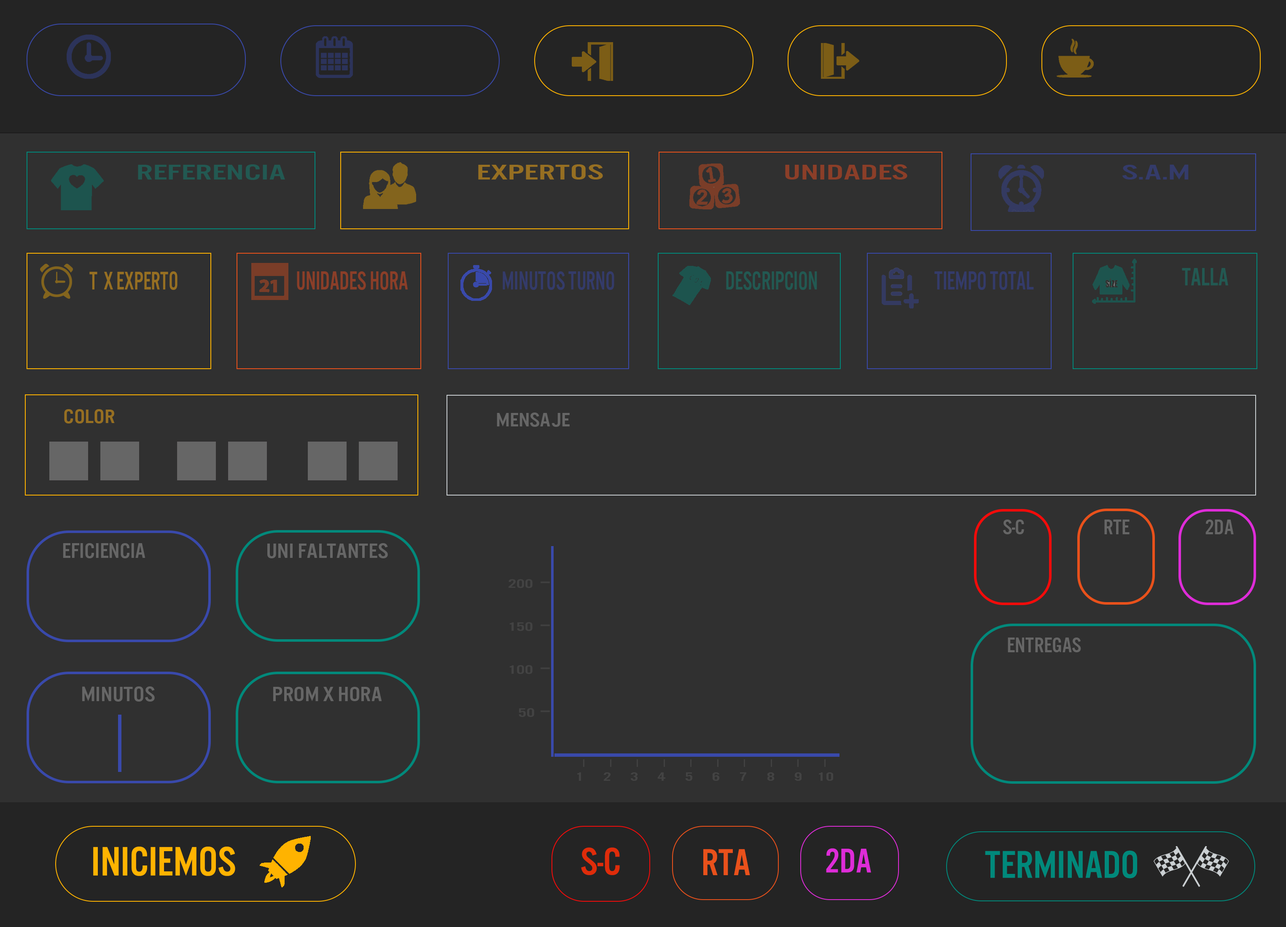
<style>
.page{position:relative;width:1286px;height:927px;background:#303030}
.page>*{position:absolute;margin:0}
.t1{font:22.2px "U.S.101";color:#225952;scale:1.71 1}
.t2{font:22.2px "U.S.101";color:#966f22;scale:1.71 1}
.t3{font:22.2px "U.S.101";color:#8b3e28;scale:1.71 1}
.t4{font:22.2px "U.S.101";color:#343b6a;scale:1.71 1}
.t5{font:26px "U.S.101";color:#225952;scale:0.89 1}
.t6{font:26.8px "U.S.101";color:#966f22;scale:0.79 1}
.t7{font:27.1px "U.S.101";color:#8b3e28;scale:0.79 1}
.t8{font:27.1px "U.S.101";color:#343b6a;scale:0.78 1}
.t9{font:27.1px "U.S.101";color:#225952;scale:0.78 1}
.t10{font:27.1px "U.S.101";color:#343b6a;scale:0.79 1}
.t11{font:20.2px "U.S.101";color:#966f22;scale:1.18 1}
.t12{font:20.2px "U.S.101";color:#666666;scale:1.18 1}
.t13{font:30.5px "U.S.101";color:#ffffff;scale:1.18 1}
.t14{font:22.1px "U.S.101";color:#666666}
.t15{font:22.1px "U.S.101";color:#666666;scale:1.07 1}
.t16{font:21.7px "U.S.101";color:#666666;scale:1.14 1}
.t17{font:12.6px "U.S.101";color:#434343;scale:1.61 1}
.t18{font:42.6px "U.S.101";color:#ffb300}
.t19{font:40px "U.S.101";color:#df2c0a}
.t20{font:38.9px "U.S.101";color:#e9511b}
.t21{font:35.4px "U.S.101";color:#de2cd8}
.t22{font:40.1px "U.S.101";color:#00897b}
</style>
<div class="page">
<p class="t1" style="left:138px;top:164px;width:147px;height:16px">referencia</p>
<p class="t2" style="left:478px;top:164px;width:125px;height:16px">Expertos</p>
<p class="t3" style="left:785px;top:164px;width:122px;height:16px">unidades</p>
<p class="t4" style="left:1122px;top:164px;width:66px;height:16px">S.A.M</p>
<p class="t5" style="left:1182px;top:268px;width:46px;height:18px">talla</p>
<p class="t6" style="left:89px;top:271px;width:88px;height:19px">t  x experto</p>
<p class="t7" style="left:297px;top:271px;width:111px;height:19px">unidades hora</p>
<p class="t8" style="left:502px;top:271px;width:112px;height:19px">minutos turno</p>
<p class="t9" style="left:726px;top:271px;width:91px;height:19px">descripcion</p>
<p class="t10" style="left:934px;top:271px;width:100px;height:19px">tiempo total</p>
<p class="t11" style="left:64px;top:409px;width:51px;height:15px">color</p>
<p class="t12" style="left:497px;top:413px;width:73px;height:14px"><span class="t13"> </span>mensaje</p>
<p class="t14" style="left:1003px;top:520px;width:21px;height:15px">S-C</p>
<p class="t14" style="left:1104px;top:520px;width:25px;height:15px">rte</p>
<p class="t14" style="left:1205px;top:520px;width:28px;height:15px">2da</p>
<p class="t15" style="left:63px;top:543px;width:82px;height:16px">eficiencia</p>
<p class="t16" style="left:267px;top:543px;width:121px;height:16px">uni faltantes</p>
<p class="t17" style="left:508px;top:579px;width:24px;height:9px">200</p>
<p class="t17" style="left:509px;top:622px;width:23px;height:9px">150</p>
<p class="t14" style="left:1008px;top:638px;width:73px;height:15px">entregas</p>
<p class="t17" style="left:509px;top:665px;width:23px;height:9px">100</p>
<p class="t16" style="left:82px;top:687px;width:73px;height:15px">minutos</p>
<p class="t16" style="left:273px;top:687px;width:109px;height:14px">PROM X HORA</p>
<p class="t17" style="left:519px;top:708px;width:15px;height:9px">50</p>
<p class="t17" style="left:577px;top:773px;width:4px;height:8px">1</p>
<p class="t17" style="left:604px;top:773px;width:6px;height:8px">2</p>
<p class="t17" style="left:631px;top:773px;width:6px;height:8px">3</p>
<p class="t17" style="left:658px;top:773px;width:7px;height:8px">4</p>
<p class="t17" style="left:685px;top:773px;width:7px;height:8px">5</p>
<p class="t17" style="left:712px;top:773px;width:7px;height:8px">6</p>
<p class="t17" style="left:740px;top:773px;width:6px;height:8px">7</p>
<p class="t17" style="left:767px;top:773px;width:7px;height:8px">8</p>
<p class="t17" style="left:795px;top:773px;width:6px;height:8px">9</p>
<p class="t17" style="left:819px;top:773px;width:14px;height:8px">10</p>
<p class="t18" style="left:93px;top:847px;width:142px;height:29px">iniciemos</p>
<p class="t19" style="left:581px;top:848px;width:39px;height:28px">s-c</p>
<p class="t20" style="left:703px;top:849px;width:47px;height:27px">rta</p>
<p class="t21" style="left:826px;top:849px;width:45px;height:24px">2da</p>
<p class="t22" style="left:985px;top:851px;width:152px;height:28px">terminado</p>
</div>
